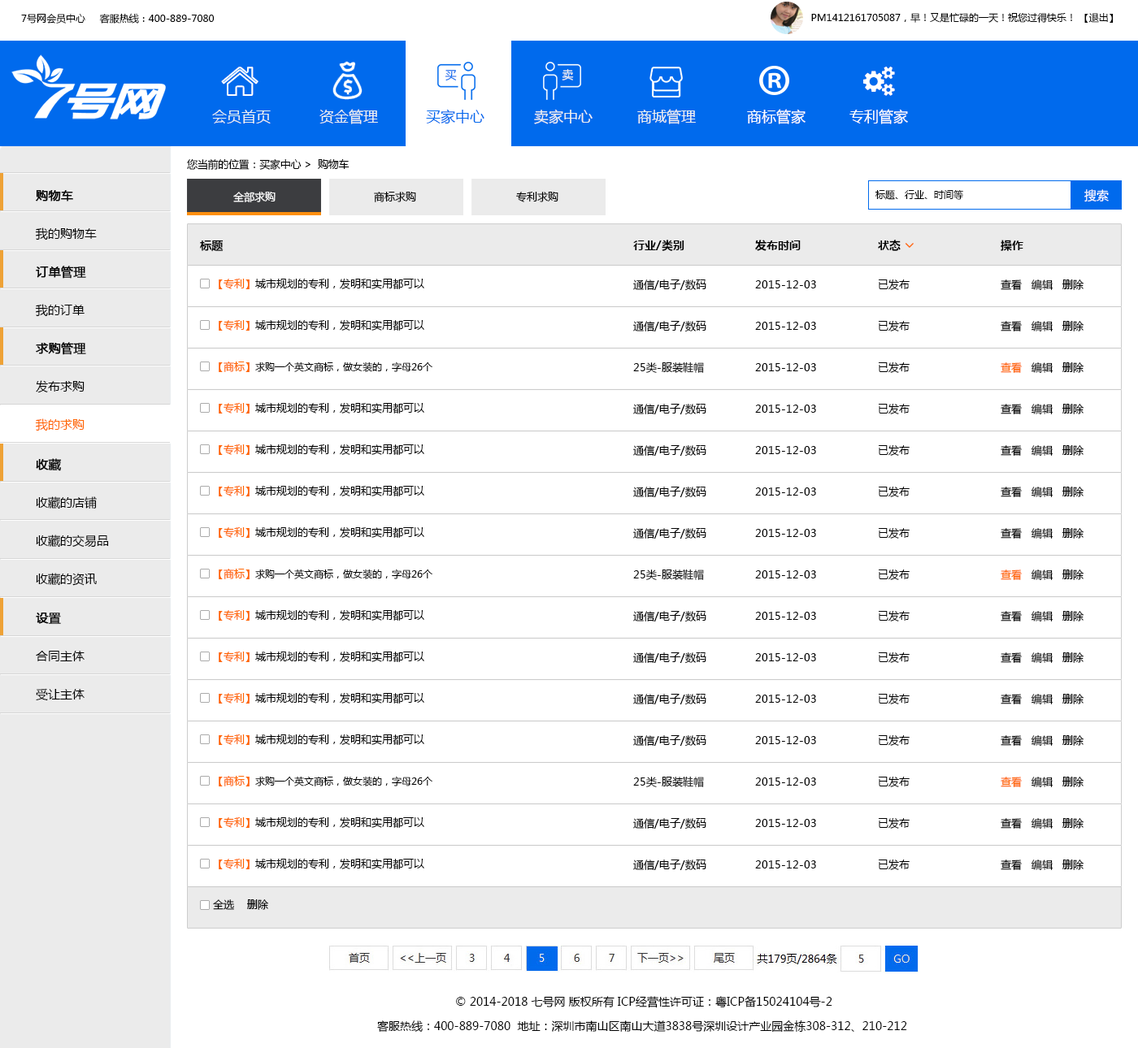
<style>
.page{position:relative;width:1138px;height:1048px;background:#ffffff}
.page>*{position:absolute;margin:0}
.t1{font:9.8px "MicrosoftYaHei";color:#000000}
.t2{font:11.4px "MicrosoftYaHei";color:#006aed}
.t3{font:11.4px "MicrosoftYaHei";color:#ecf0f1}
.t4{font:14.6px "MicrosoftYaHei";color:#ecf0f1}
.t5{font:14.6px "MicrosoftYaHei";color:#006aed}
.t6{font:14.6px "MicrosoftYaHei";color:#ffffff}
.t7{font:10.6px "MicrosoftYaHei";letter-spacing:-0.02em;color:#000000}
.t8{font:12.2px/38.2px "MicrosoftYaHei";color:#000000}
.t9{font:12.2px/38.2px "MicrosoftYaHei";color:#000000;font-weight:bold}
.t10{font:10.6px "MicrosoftYaHei";color:#ffffff}
.t11{font:10.6px "MicrosoftYaHei";color:#000000}
.t12{font:12.2px "MicrosoftYaHei";color:#ffffff}
.t13{font:11.4px "MicrosoftYaHei";color:#000000;font-weight:bold}
.t14{font:11.4px "MicrosoftYaHei-Bold";color:#000000}
.t15{font:10.6px "MicrosoftYaHei";color:#ff6600}
.t16{font:12.2px/38.2px "MicrosoftYaHei";color:#ff6600}
.t17{font:11.4px/24.4px "MicrosoftYaHei";color:#000000}
</style>
<div class="page">
<p class="t1" style="left:21px;top:13px;width:194px;height:11px">7号网会员中心     客服热线：400-889-7080</p>
<p class="t1" style="left:811px;top:13px;width:302px;height:10px">PM1412161705087，早！又是忙碌的一天！祝您过得快乐！ 【退出】</p>
<p class="t2" style="left:444px;top:70px;width:13px;height:11px">买</p>
<p class="t3" style="left:561px;top:69px;width:13px;height:11px">卖</p>
<p class="t4" style="left:212px;top:110px;width:59px;height:14px">会员首页</p>
<p class="t4" style="left:319px;top:109px;width:59px;height:15px">资金管理</p>
<p class="t5" style="left:426px;top:109px;width:58px;height:15px">买家中心</p>
<p class="t4" style="left:534px;top:109px;width:58px;height:15px">卖家中心</p>
<p class="t4" style="left:637px;top:109px;width:59px;height:15px">商城管理</p>
<p class="t6" style="left:747px;top:109px;width:58px;height:15px">商标管家</p>
<p class="t6" style="left:849px;top:109px;width:59px;height:15px">专利管家</p>
<p class="t7" style="left:187px;top:158px;width:162px;height:12px">您当前的位置：买家中心 &gt;  购物车</p>
<p class="t8" style="left:35px;top:190px;width:62px;height:51px"><span class="t9">购物车<br></span>我的购物车</p>
<p class="t10" style="left:233px;top:192px;width:42px;height:10px">全部求购</p>
<p class="t11" style="left:374px;top:192px;width:42px;height:10px">商标求购</p>
<p class="t11" style="left:516px;top:192px;width:42px;height:10px">专利求购</p>
<p class="t1" style="left:875px;top:189px;width:88px;height:11px">标题、行业、时间等</p>
<p class="t12" style="left:1084px;top:189px;width:24px;height:13px">搜索</p>
<p class="t13" style="left:200px;top:240px;width:23px;height:12px">标题</p>
<p class="t14" style="left:633px;top:240px;width:51px;height:11px">行业/类别</p>
<p class="t14" style="left:755px;top:240px;width:45px;height:11px">发布时间</p>
<p class="t14" style="left:878px;top:240px;width:22px;height:11px">状态</p>
<p class="t14" style="left:1000px;top:240px;width:23px;height:11px">操作</p>
<p class="t9" style="left:35px;top:266px;width:51px;height:51px">订单管理<br><span class="t8">我的订单</span></p>
<p class="t11" style="left:219px;top:278px;width:205px;height:11px"><span class="t15">【专利】</span>城市规划的专利，发明和实用都可以</p>
<p class="t11" style="left:633px;top:280px;width:73px;height:11px">通信/电子/数码</p>
<p class="t11" style="left:755px;top:280px;width:61px;height:8px">2015-12-03</p>
<p class="t11" style="left:878px;top:279px;width:31px;height:11px">已发布</p>
<p class="t11" style="left:1000px;top:280px;width:83px;height:10px">查看   编辑   删除</p>
<p class="t11" style="left:219px;top:319px;width:205px;height:12px"><span class="t15">【专利】</span>城市规划的专利，发明和实用都可以</p>
<p class="t11" style="left:633px;top:321px;width:73px;height:11px">通信/电子/数码</p>
<p class="t11" style="left:755px;top:322px;width:61px;height:8px">2015-12-03</p>
<p class="t11" style="left:878px;top:320px;width:31px;height:12px">已发布</p>
<p class="t11" style="left:1000px;top:321px;width:83px;height:11px">查看   编辑   删除</p>
<p class="t9" style="left:35px;top:342px;width:51px;height:89px">求购管理<br><span class="t8">发布求购<br></span><span class="t16">我的求购</span></p>
<p class="t1" style="left:219px;top:362px;width:213px;height:10px"><span class="t15">【商标】</span>求购一个英文商标，做女装的，字母26个</p>
<p class="t11" style="left:633px;top:362px;width:71px;height:11px">25类-服装鞋帽</p>
<p class="t11" style="left:755px;top:363px;width:61px;height:8px">2015-12-03</p>
<p class="t11" style="left:878px;top:362px;width:31px;height:11px">已发布</p>
<p class="t11" style="left:1000px;top:362px;width:83px;height:11px"><span class="t15">查看 </span>  编辑   删除</p>
<p class="t11" style="left:219px;top:402px;width:205px;height:12px"><span class="t15">【专利】</span>城市规划的专利，发明和实用都可以</p>
<p class="t11" style="left:633px;top:404px;width:73px;height:11px">通信/电子/数码</p>
<p class="t11" style="left:755px;top:405px;width:61px;height:8px">2015-12-03</p>
<p class="t11" style="left:878px;top:403px;width:31px;height:11px">已发布</p>
<p class="t11" style="left:1000px;top:404px;width:83px;height:10px">查看   编辑   删除</p>
<p class="t11" style="left:219px;top:444px;width:205px;height:11px"><span class="t15">【专利】</span>城市规划的专利，发明和实用都可以</p>
<p class="t11" style="left:633px;top:445px;width:73px;height:12px">通信/电子/数码</p>
<p class="t11" style="left:755px;top:446px;width:61px;height:8px">2015-12-03</p>
<p class="t11" style="left:878px;top:444px;width:31px;height:12px">已发布</p>
<p class="t11" style="left:1000px;top:445px;width:83px;height:11px">查看   编辑   删除</p>
<p class="t8" style="left:36px;top:458px;width:73px;height:128px"><span class="t9">收藏<br></span>收藏的店铺<br>收藏的交易品<br>收藏的资讯</p>
<p class="t11" style="left:219px;top:485px;width:205px;height:11px"><span class="t15">【专利】</span>城市规划的专利，发明和实用都可以</p>
<p class="t11" style="left:878px;top:486px;width:31px;height:11px">已发布</p>
<p class="t11" style="left:633px;top:487px;width:73px;height:11px">通信/电子/数码</p>
<p class="t11" style="left:755px;top:488px;width:61px;height:8px">2015-12-03</p>
<p class="t11" style="left:1000px;top:487px;width:83px;height:10px">查看   编辑   删除</p>
<p class="t11" style="left:219px;top:527px;width:205px;height:11px"><span class="t15">【专利】</span>城市规划的专利，发明和实用都可以</p>
<p class="t11" style="left:633px;top:528px;width:73px;height:12px">通信/电子/数码</p>
<p class="t11" style="left:755px;top:529px;width:61px;height:8px">2015-12-03</p>
<p class="t11" style="left:878px;top:527px;width:31px;height:12px">已发布</p>
<p class="t11" style="left:1000px;top:528px;width:83px;height:11px">查看   编辑   删除</p>
<p class="t1" style="left:219px;top:569px;width:213px;height:10px"><span class="t15">【商标】</span>求购一个英文商标，做女装的，字母26个</p>
<p class="t11" style="left:633px;top:569px;width:71px;height:11px">25类-服装鞋帽</p>
<p class="t11" style="left:878px;top:569px;width:31px;height:11px">已发布</p>
<p class="t11" style="left:1000px;top:570px;width:83px;height:10px"><span class="t15">查看 </span>  编辑   删除</p>
<p class="t11" style="left:755px;top:570px;width:61px;height:9px">2015-12-03</p>
<p class="t8" style="left:36px;top:613px;width:49px;height:88px"><span class="t9">设置<br></span>合同主体<br>受让主体</p>
<p class="t11" style="left:219px;top:609px;width:205px;height:12px"><span class="t15">【专利】</span>城市规划的专利，发明和实用都可以</p>
<p class="t11" style="left:633px;top:611px;width:73px;height:11px">通信/电子/数码</p>
<p class="t11" style="left:755px;top:612px;width:61px;height:8px">2015-12-03</p>
<p class="t11" style="left:878px;top:610px;width:31px;height:12px">已发布</p>
<p class="t11" style="left:1000px;top:611px;width:83px;height:11px">查看   编辑   删除</p>
<p class="t11" style="left:219px;top:651px;width:205px;height:11px"><span class="t15">【专利】</span>城市规划的专利，发明和实用都可以</p>
<p class="t11" style="left:633px;top:652px;width:73px;height:12px">通信/电子/数码</p>
<p class="t11" style="left:755px;top:653px;width:61px;height:8px">2015-12-03</p>
<p class="t11" style="left:878px;top:652px;width:31px;height:11px">已发布</p>
<p class="t11" style="left:1000px;top:652px;width:83px;height:11px">查看   编辑   删除</p>
<p class="t11" style="left:219px;top:692px;width:205px;height:12px"><span class="t15">【专利】</span>城市规划的专利，发明和实用都可以</p>
<p class="t11" style="left:633px;top:694px;width:73px;height:11px">通信/电子/数码</p>
<p class="t11" style="left:755px;top:695px;width:61px;height:8px">2015-12-03</p>
<p class="t11" style="left:878px;top:693px;width:31px;height:11px">已发布</p>
<p class="t11" style="left:1000px;top:694px;width:83px;height:10px">查看   编辑   删除</p>
<p class="t11" style="left:219px;top:734px;width:205px;height:11px"><span class="t15">【专利】</span>城市规划的专利，发明和实用都可以</p>
<p class="t11" style="left:633px;top:735px;width:73px;height:12px">通信/电子/数码</p>
<p class="t11" style="left:755px;top:736px;width:61px;height:8px">2015-12-03</p>
<p class="t11" style="left:878px;top:735px;width:31px;height:11px">已发布</p>
<p class="t11" style="left:1000px;top:735px;width:83px;height:11px">查看   编辑   删除</p>
<p class="t1" style="left:219px;top:776px;width:213px;height:11px"><span class="t15">【商标】</span>求购一个英文商标，做女装的，字母26个</p>
<p class="t11" style="left:633px;top:776px;width:71px;height:11px">25类-服装鞋帽</p>
<p class="t11" style="left:755px;top:778px;width:61px;height:8px">2015-12-03</p>
<p class="t11" style="left:878px;top:776px;width:31px;height:11px">已发布</p>
<p class="t11" style="left:1000px;top:777px;width:83px;height:10px"><span class="t15">查看 </span>  编辑   删除</p>
<p class="t11" style="left:219px;top:817px;width:205px;height:11px"><span class="t15">【专利】</span>城市规划的专利，发明和实用都可以</p>
<p class="t11" style="left:633px;top:818px;width:73px;height:12px">通信/电子/数码</p>
<p class="t11" style="left:755px;top:819px;width:61px;height:8px">2015-12-03</p>
<p class="t11" style="left:878px;top:817px;width:31px;height:12px">已发布</p>
<p class="t11" style="left:1000px;top:818px;width:83px;height:11px">查看   编辑   删除</p>
<p class="t11" style="left:219px;top:858px;width:205px;height:11px"><span class="t15">【专利】</span>城市规划的专利，发明和实用都可以</p>
<p class="t11" style="left:633px;top:860px;width:73px;height:11px">通信/电子/数码</p>
<p class="t11" style="left:755px;top:861px;width:61px;height:8px">2015-12-03</p>
<p class="t11" style="left:878px;top:859px;width:31px;height:11px">已发布</p>
<p class="t11" style="left:1000px;top:860px;width:83px;height:10px">查看   编辑   删除</p>
<p class="t11" style="left:213px;top:900px;width:55px;height:10px">全选    删除</p>
<p class="t17" style="left:377px;top:996px;width:530px;height:37px;text-align:center">© 2014-2018 七号网 版权所有 ICP经营性许可证：粤ICP备15024104号-2<br>客服热线：400-889-7080  地址：深圳市南山区南山大道3838号深圳设计产业园金栋308-312、210-212</p>
</div>
